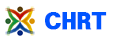
<style>
.page{position:relative;width:113px;height:43px;background:#ffffff}
.page>*{position:absolute;margin:0}
.t1{font:20px "HeadlineR-HM";letter-spacing:-0.05em;color:#0054ff;font-weight:bold}
</style>
<div class="page">
<p class="t1" style="left:45px;top:12px;width:62px;height:18px">CHRT</p>
</div>
